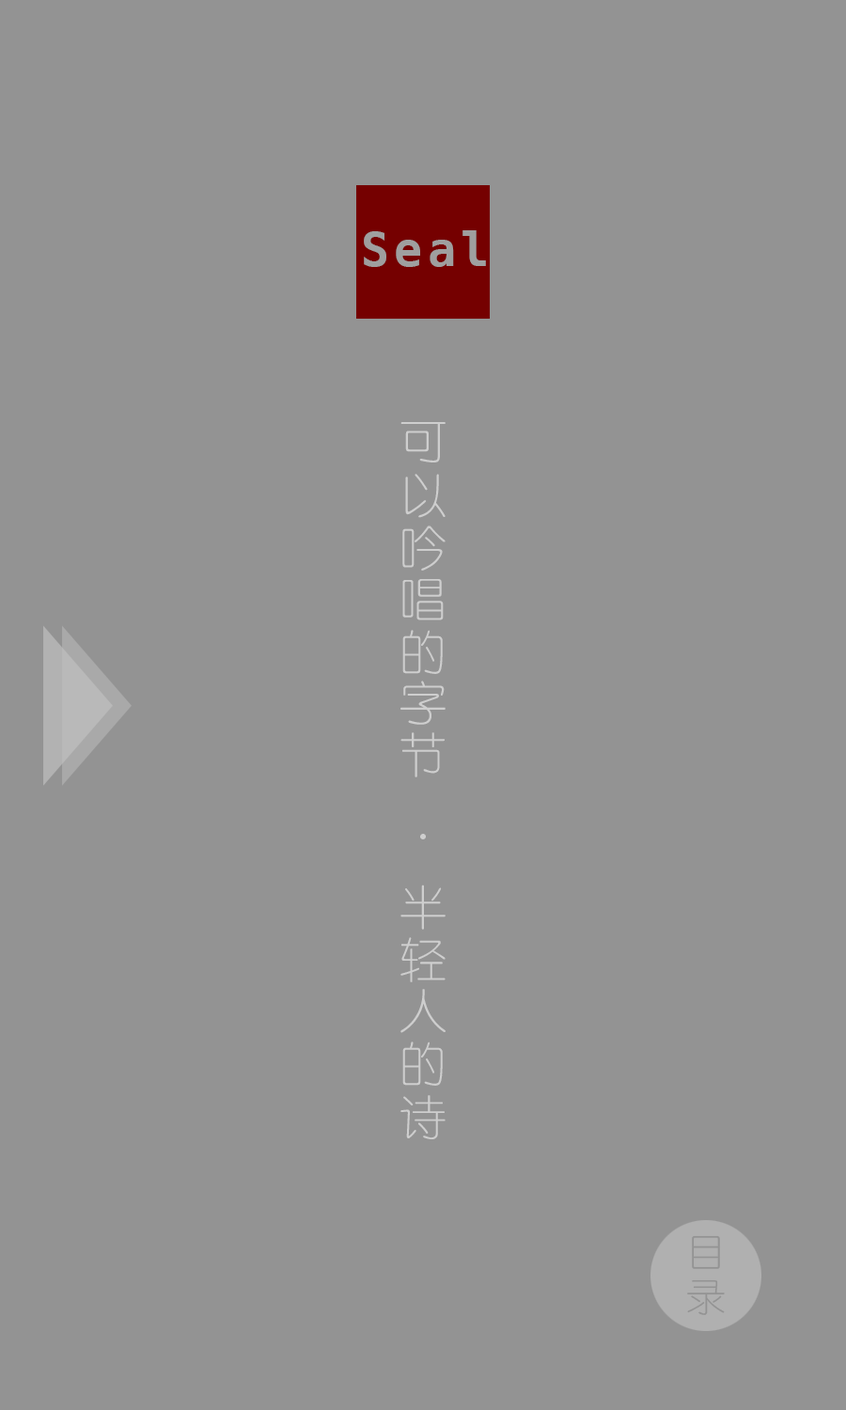
<style>
.page{position:relative;width:846px;height:1410px;background:#939393}
.page>*{position:absolute;margin:0}
.t1{font:11.3px/188px "STYuanti-SC-Light";letter-spacing:0.1em;color:#cecece}
</style>
<div class="page">
<p class="t1" style="left:400px;top:422px;width:45px;height:717px">可以吟唱的字节   ·半轻人的诗</p>
</div>
